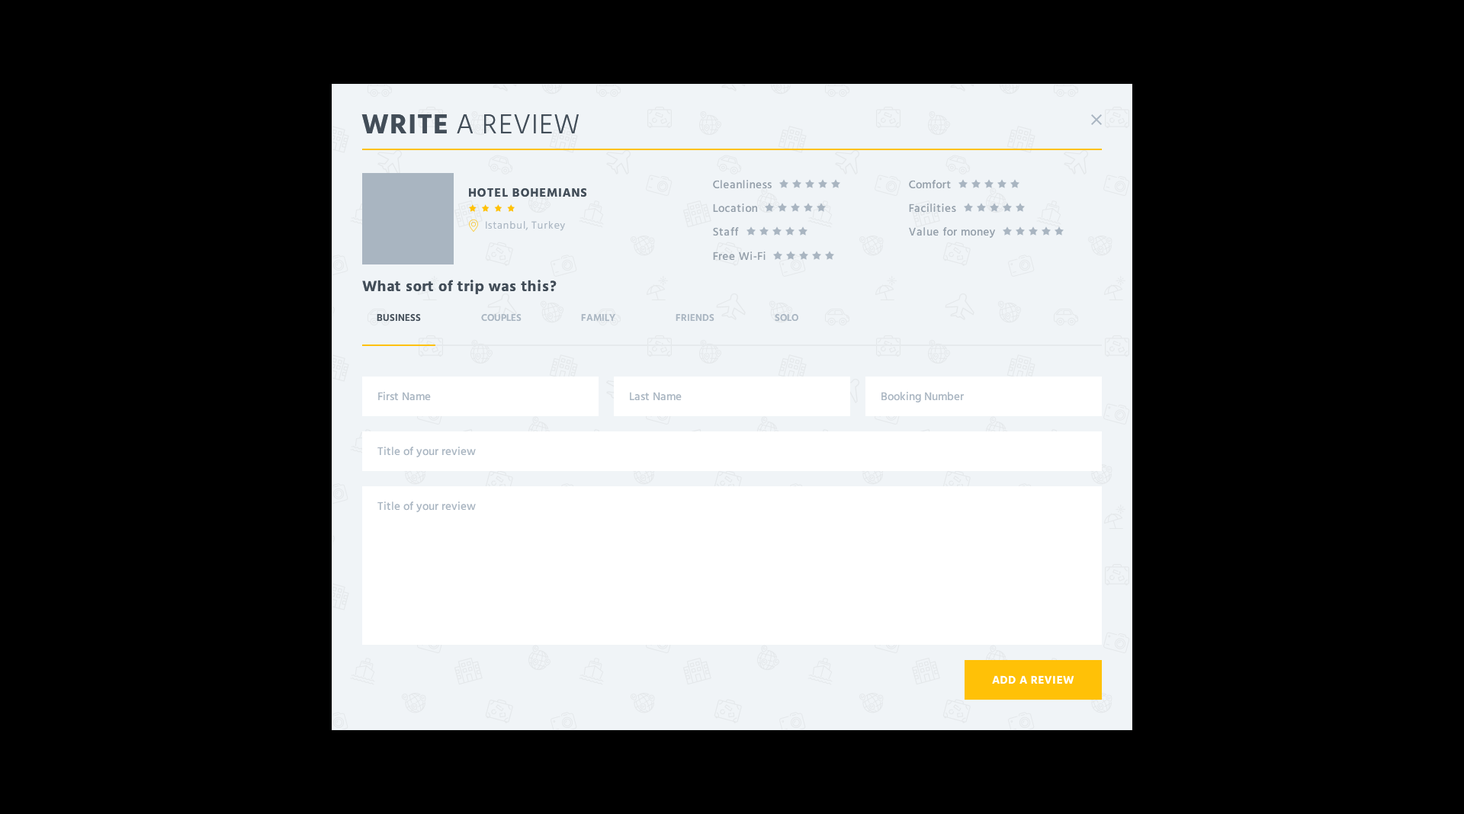
<style>
.page{position:relative;width:1464px;height:814px;background:#000000}
.page>*{position:absolute;margin:0}
.t1{font:28.2px "HindSiliguri-Light";letter-spacing:0.03em;color:#424d58;text-transform:uppercase}
.t2{font:28.2px "HindSiliguri-Bold";letter-spacing:0.03em;color:#424d58;text-transform:uppercase}
.t3{font:11.4px "HindSiliguri-Medium";letter-spacing:0.03em;color:#939ea9}
.t4{font:12.2px "HindSiliguri-Bold";letter-spacing:0.05em;color:#424d58;text-transform:uppercase}
.t5{font:10.7px "HindSiliguri-Regular";letter-spacing:0.05em;color:#a9b5c1}
.t6{font:15.3px "HindSiliguri-Bold";letter-spacing:0.03em;color:#424d58}
.t7{font:9.9px "HindSiliguri-SemiBold";color:#424d58;text-transform:uppercase}
.t8{font:9.9px "HindSiliguri-SemiBold";color:#a9b5c1;text-transform:uppercase}
.t9{font:11.4px "HindSiliguri-Medium";color:#a9b5c1}
.t10{font:11.4px "HindSiliguri-Bold";letter-spacing:0.03em;color:#ffffff;text-transform:uppercase}
</style>
<div class="page">
<p class="t1" style="left:361px;top:114px;width:218px;height:19px"><span class="t2">Write</span> a review</p>
<p class="t3" style="left:713px;top:180px;width:59px;height:9px">Cleanliness</p>
<p class="t3" style="left:909px;top:180px;width:42px;height:9px">Comfort</p>
<p class="t4" style="left:469px;top:188px;width:117px;height:10px">Hotel Bohemians</p>
<p class="t3" style="left:713px;top:204px;width:44px;height:9px">Location</p>
<p class="t3" style="left:909px;top:204px;width:47px;height:9px">Facilities</p>
<p class="t5" style="left:486px;top:221px;width:79px;height:10px">Istanbul, Turkey</p>
<p class="t3" style="left:713px;top:227px;width:26px;height:9px">Staff</p>
<p class="t3" style="left:909px;top:227px;width:86px;height:11px">Value for money</p>
<p class="t3" style="left:713px;top:252px;width:53px;height:8px">Free Wi-Fi</p>
<p class="t6" style="left:362px;top:280px;width:195px;height:14px">What sort of trip was this?</p>
<p class="t7" style="left:377px;top:314px;width:44px;height:8px">Business</p>
<p class="t8" style="left:481px;top:314px;width:41px;height:8px">Couples</p>
<p class="t8" style="left:581px;top:314px;width:34px;height:7px">Family</p>
<p class="t8" style="left:676px;top:314px;width:39px;height:8px">Friends</p>
<p class="t8" style="left:775px;top:314px;width:23px;height:8px">Solo</p>
<p class="t9" style="left:378px;top:392px;width:53px;height:8px">First Name</p>
<p class="t9" style="left:630px;top:392px;width:52px;height:8px">Last Name</p>
<p class="t9" style="left:882px;top:392px;width:82px;height:11px">Booking Number</p>
<p class="t9" style="left:377px;top:447px;width:99px;height:11px">Title of your review</p>
<p class="t9" style="left:377px;top:502px;width:99px;height:10px">Title of your review</p>
<p class="t10" style="left:992px;top:676px;width:82px;height:8px">Add a review</p>
</div>
